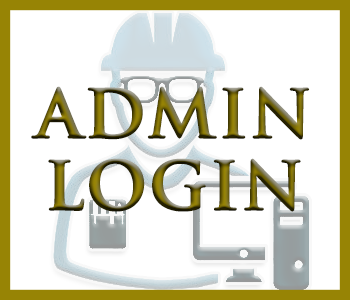
<style>
.page{position:relative;width:350px;height:300px;background:#ffffff}
.page>*{position:absolute;margin:0}
.t1{font:65px/72px "TrajanPro-Bold";letter-spacing:0.015em;font-weight:bold}
</style>
<div class="page">
<p class="t1" style="left:31px;top:86px;width:279px;height:126px;text-align:center">ADMIN<br>LOGIN</p>
</div>
